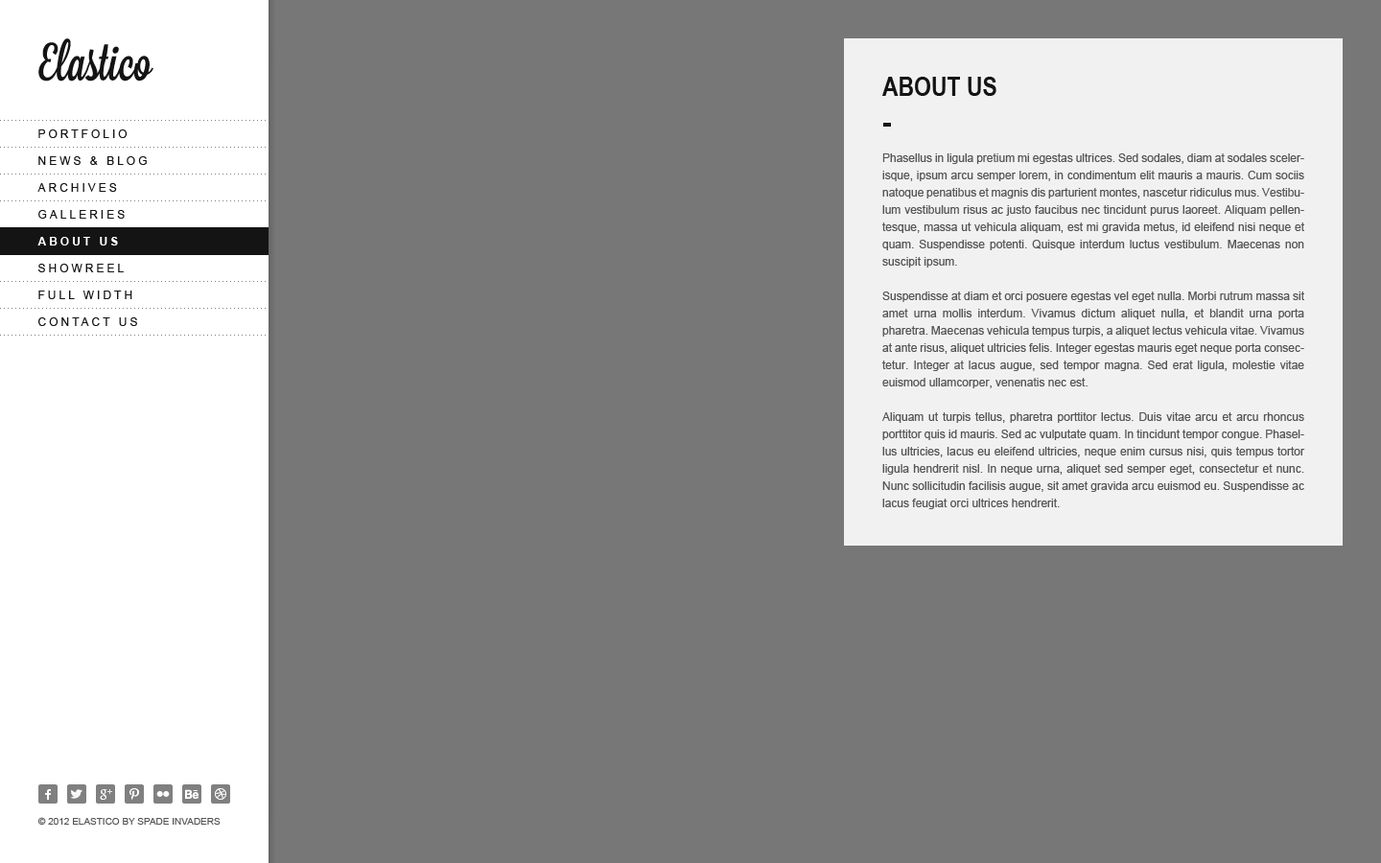
<style>
.page{position:relative;width:1381px;height:863px;background:#777777}
.page>*{position:absolute;margin:0}
.t1{font:26.9px "ArialNarrow-Bold";color:#141414;text-transform:uppercase}
.t2{font:11.5px "ArialMT";letter-spacing:0.25em;color:#141414;text-transform:uppercase}
.t3{font:11.5px/17.3px "ArialMT";color:#555555}
.t4{font:11.5px "Arial-BoldMT";letter-spacing:0.25em;color:#ffffff;text-transform:uppercase}
.t5{font:9.6px "ArialMT";color:#555555;text-transform:uppercase}
</style>
<div class="page">
<p class="t1" style="left:882px;top:77px;width:115px;height:19px">about us</p>
<p class="t2" style="left:38px;top:129px;width:90px;height:9px">portfolio</p>
<p class="t2" style="left:38px;top:156px;width:109px;height:9px">news &amp; blog</p>
<p class="t3" style="left:882px;top:153px;width:423px;height:356px;text-align:justify">Phasellus in ligula pretium mi egestas ultrices. Sed sodales, diam at sodales scelerisque, ipsum arcu semper lorem, in condimentum elit mauris a mauris. Cum sociis natoque penatibus et magnis dis parturient montes, nascetur ridiculus mus. Vestibulum vestibulum risus ac justo faucibus nec tincidunt purus laoreet. Aliquam pellentesque, massa ut vehicula aliquam, est mi gravida metus, id eleifend nisi neque et quam. Suspendisse potenti. Quisque interdum luctus vestibulum. Maecenas non suscipit ipsum.<br><br>Suspendisse at diam et orci posuere egestas vel eget nulla. Morbi rutrum massa sit amet urna mollis interdum. Vivamus dictum aliquet nulla, et blandit urna porta pharetra. Maecenas vehicula tempus turpis, a aliquet lectus vehicula vitae. Vivamus at ante risus, aliquet ultricies felis. Integer egestas mauris eget neque porta consectetur. Integer at lacus augue, sed tempor magna. Sed erat ligula, molestie vitae euismod ullamcorper, venenatis nec est. <br><br>Aliquam ut turpis tellus, pharetra porttitor lectus. Duis vitae arcu et arcu rhoncus porttitor quis id mauris. Sed ac vulputate quam. In tincidunt tempor congue. Phasellus ultricies, lacus eu eleifend ultricies, neque enim cursus nisi, quis tempus tortor ligula hendrerit nisl. In neque urna, aliquet sed semper eget, consectetur et nunc. Nunc sollicitudin facilisis augue, sit amet gravida arcu euismod eu. Suspendisse ac lacus feugiat orci ultrices hendrerit.</p>
<p class="t2" style="left:37px;top:183px;width:80px;height:9px">archives</p>
<p class="t2" style="left:38px;top:210px;width:87px;height:9px">galleries</p>
<p class="t4" style="left:37px;top:237px;width:81px;height:9px">about us</p>
<p class="t2" style="left:38px;top:264px;width:86px;height:8px">showreel</p>
<p class="t2" style="left:38px;top:291px;width:94px;height:8px">full width</p>
<p class="t2" style="left:38px;top:317px;width:99px;height:9px">contact us</p>
<p class="t5" style="left:37px;top:817px;width:184px;height:9px">© 2012 elastico by spade invaders</p>
</div>
